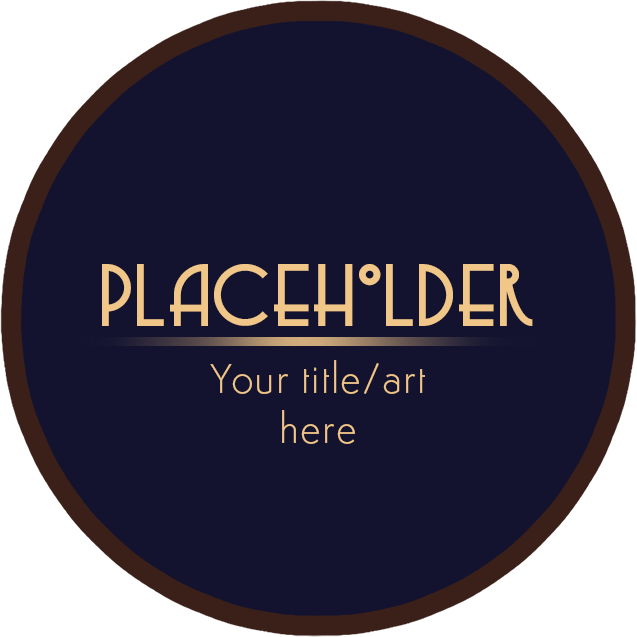
<style>
.page{position:relative;width:637px;height:637px;background:#131330}
.page>*{position:absolute;margin:0}
.t1{font:82.3px "CopaseticNF";letter-spacing:0.025em;color:#f1c689}
.t2{font:41.7px "Semplicita-Light";letter-spacing:0.025em;color:#f1c689}
</style>
<div class="page">
<p class="t1" style="left:102px;top:264px;width:431px;height:62px">Placeholder</p>
<p class="t2" style="left:210px;top:360px;width:215px;height:84px;text-align:center">Your title/art<br>here</p>
</div>
